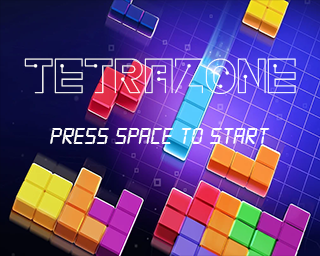
<style>
.page{position:relative;width:320px;height:256px}
.page>*{position:absolute;margin:0}
.t1{font:58.3px "exwayer";color:#ffffff}
.t2{font:25px "Digital-7";color:#ffffff;font-style:italic}
</style>
<div class="page">
<p class="t1" style="left:24px;top:58px;width:272px;height:36px">TETRAZONE</p>
<p class="t2" style="left:50px;top:128px;width:220px;height:16px">Press Space TO START</p>
</div>
